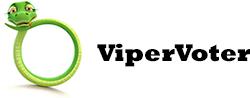
<style>
.page{position:relative;width:250px;height:98px;background:#ffffff}
.page>*{position:absolute;margin:0}
.t1{font:24.7px "Rockwell-ExtraBold";color:#000000}
</style>
<div class="page">
<p class="t1" style="left:97px;top:43px;width:154px;height:24px">ViperVoter</p>
</div>
